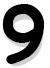
<style>
.page{position:relative;width:50px;height:68px;background:#ffffff}
.page>*{position:absolute;margin:0}
.t1{font:75px "ComicSansMS-Bold";color:#000000}
</style>
<div class="page">
<p class="t1" style="left:2px;top:4px;width:42px;height:60px">9</p>
</div>
